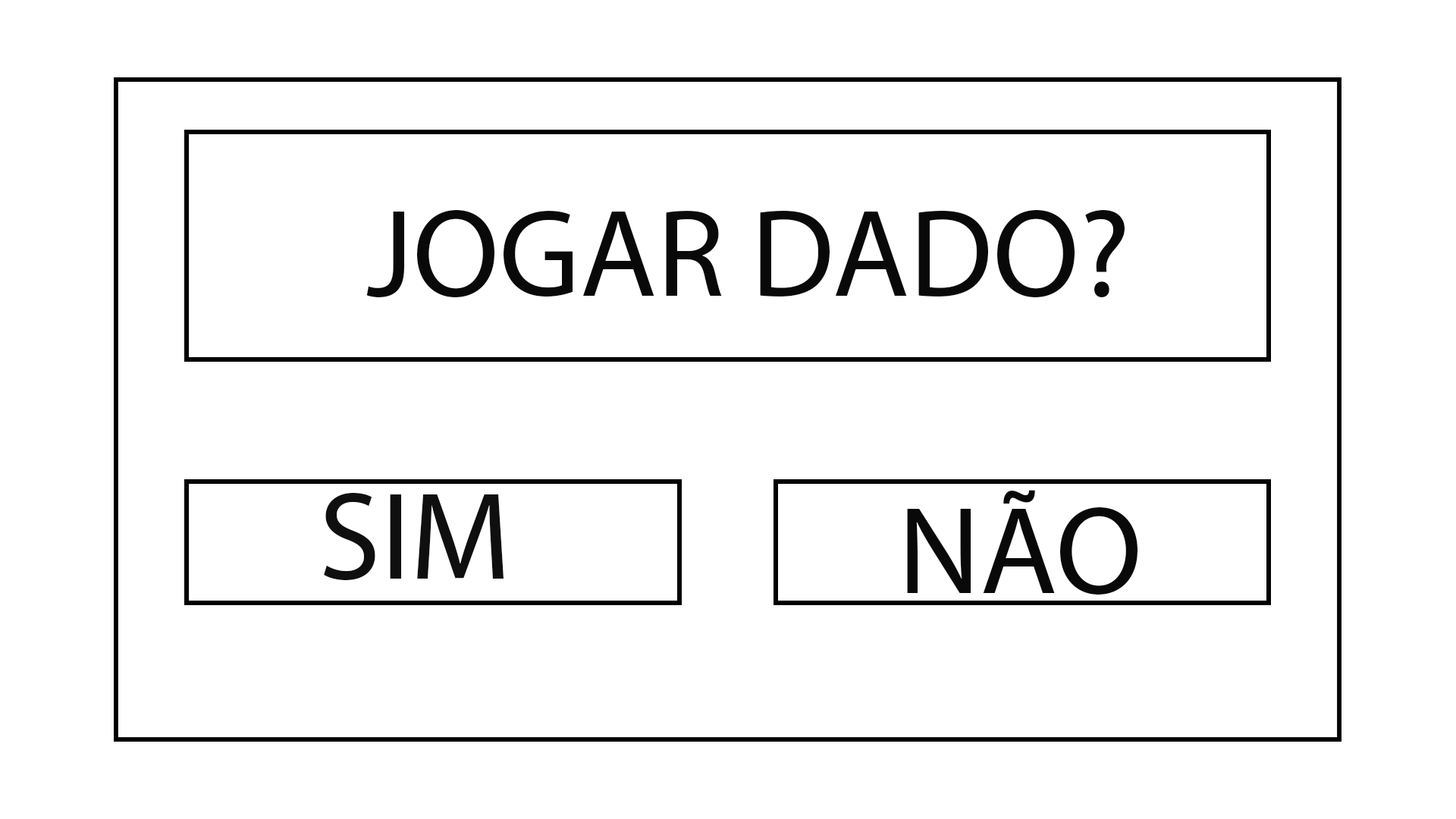
<style>
.page{position:relative;width:1456px;height:819px;background:#ffffff}
.page>*{position:absolute;margin:0}
.t1{font:125.4px "MyriadPro-Regular";color:#090909}
.t2{font:125.4px "MyriadPro-Regular";color:#0f0f0f}
</style>
<div class="page">
<p class="t1" style="left:366px;top:209px;width:759px;height:89px">JOGAR DADO?</p>
<p class="t2" style="left:324px;top:492px;width:180px;height:89px">SIM</p>
<p class="t1" style="left:907px;top:490px;width:230px;height:105px">NÃO</p>
</div>
